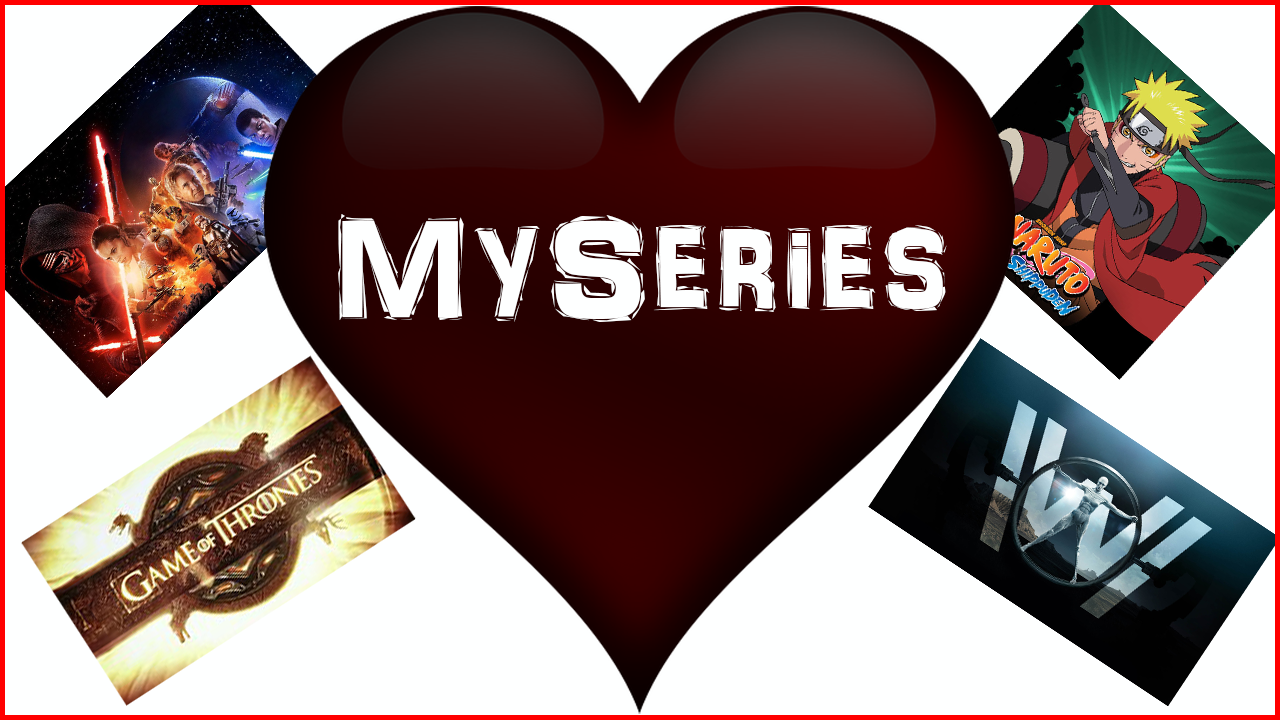
<style>
.page{position:relative;width:1280px;height:720px;background:#feffff}
.page>*{position:absolute;margin:0}
.t1{font:150px "ARDARLING";color:#feffff}
</style>
<div class="page">
<p class="t1" style="left:338px;top:214px;width:609px;height:108px">MySeries</p>
</div>
